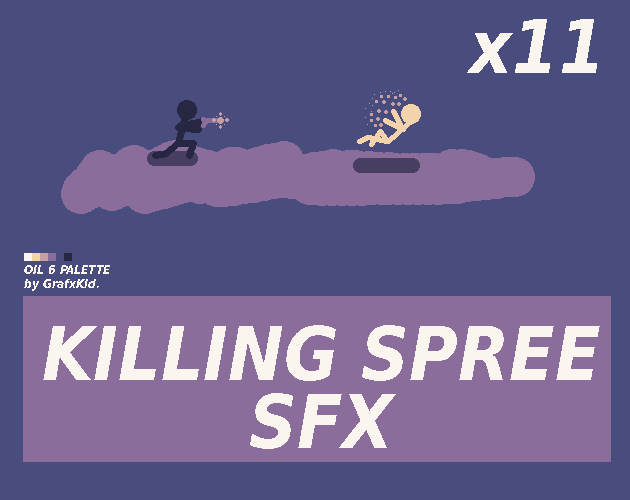
<style>
.page{position:relative;width:630px;height:500px;background:#494d7e}
.page>*{position:absolute;margin:0}
.t1{font:74px "DejaVuSansCondensed-BoldOblique";color:#fbf5ef}
.t2{font:12px "DejaVuSansCondensed-BoldOblique";color:#fbf5ef}
</style>
<div class="page">
<p class="t1" style="left:467px;top:19px;width:130px;height:54px">x11</p>
<p class="t2" style="left:24px;top:265px;width:86px;height:26px">OIL 6 PALETTE<br>by GrafxKid.</p>
<p class="t1" style="left:43px;top:325px;width:557px;height:56px">KILLING SPREE</p>
<p class="t1" style="left:250px;top:393px;width:146px;height:56px">SFX</p>
</div>
